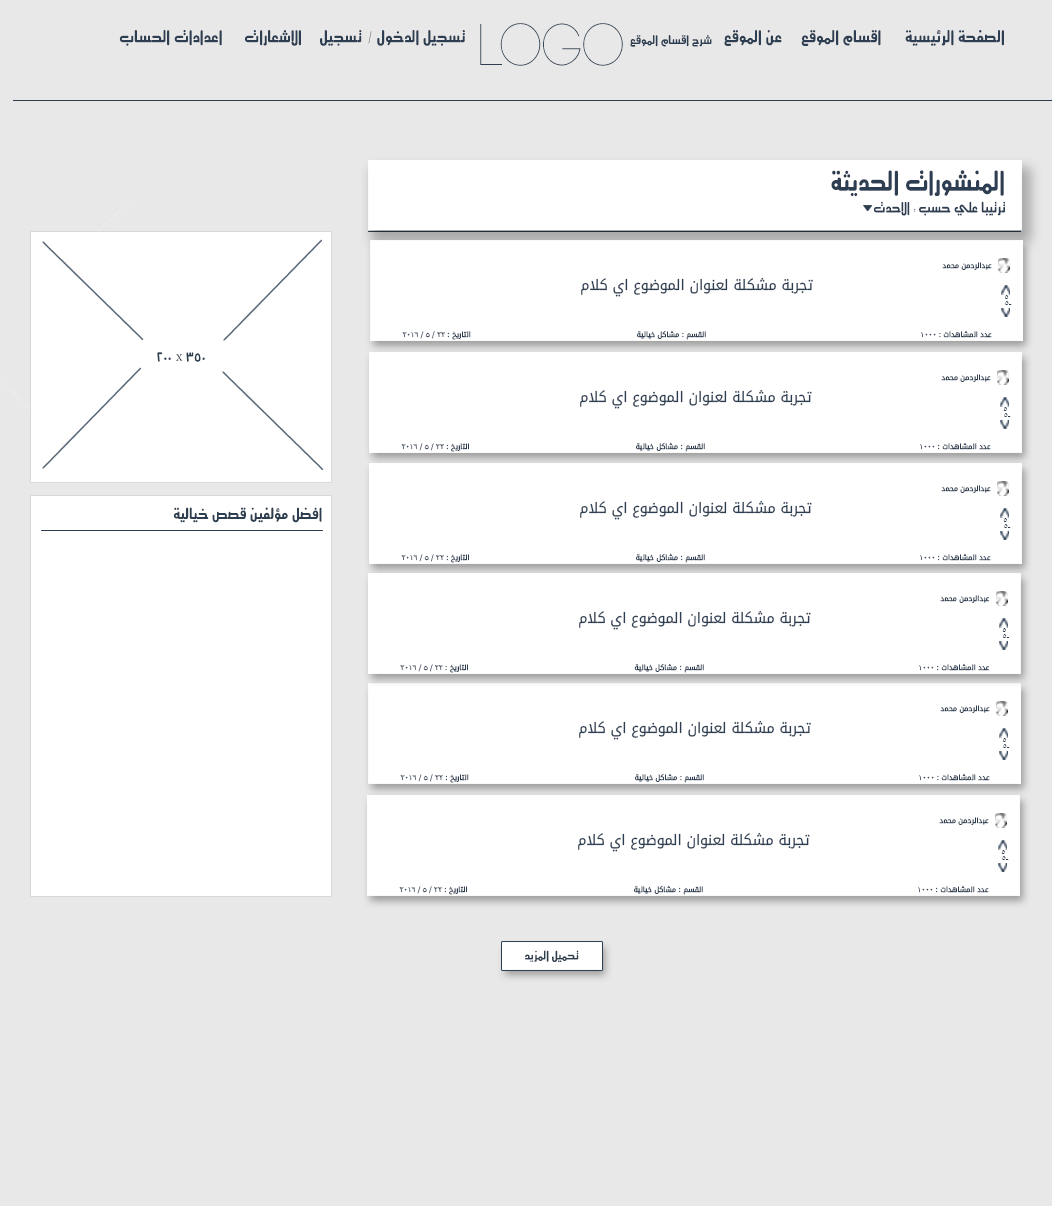
<style>
.page{position:relative;width:1052px;height:1206px;background:#ffffff}
.page>*{position:absolute;margin:0}
.t1{font:15.8px "Motken-Unicode-Anbobi";color:#2d3e52;scale:0.94 1}
.t2{font:58.8px "Code-Light";color:#2d3e52;scale:0.94 1}
.t3{font:11.6px "Motken-Unicode-Anbobi";color:#2d3e52;scale:0.94 1}
.t4{font:26.2px "Motken-Unicode-Anbobi";color:#2d3e52;scale:0.88 1}
.t5{font:13.7px "Motken-Unicode-Anbobi";color:#2d3e52;scale:0.88 1}
.t6{font:7.2px "DroidArabicKufi";color:#2d3e52}
.t7{font:14.4px "DroidArabicKufi";color:#2d3e52}
.t8{font:7.7px "TimesNewRomanPSMT";color:#2d3e52}
.t9{font:7.2px "Tahoma";color:#2d3e52}
.t10{font:14.7px "Motken-Unicode-Anbobi";color:#2d3e50;scale:0.94 1}
.t11{font:11.6px "Motken-Unicode-Anbobi";color:#2d3e50;scale:0.94 1}
</style>
<div class="page">
<p class="t1" style="left:119px;top:30px;width:103px;height:16px">اعدادات الحساب</p>
<p class="t1" style="left:245px;top:30px;width:56px;height:16px">الاشعارات</p>
<p class="t1" style="left:320px;top:30px;width:145px;height:16px">تسجيل الدخول / تسجيل</p>
<p class="t2" style="left:480px;top:23px;width:143px;height:43px">Logo</p>
<p class="t1" style="left:724px;top:30px;width:58px;height:16px">عن الموقع</p>
<p class="t1" style="left:801px;top:30px;width:80px;height:16px">اقسام الموقع</p>
<p class="t1" style="left:905px;top:30px;width:99px;height:16px">الصفحة الرئيسية</p>
<p class="t3" style="left:630px;top:35px;width:82px;height:12px">شرح اقسام الموقع</p>
<p class="t4" style="left:831px;top:170px;width:173px;height:27px">المنشورات الحديثة</p>
<p class="t5" style="left:874px;top:201px;width:131px;height:15px">ترتيبا علي حسب : الاحدث</p>
<p class="t6" style="left:942px;top:262px;width:50px;height:8px">عبدالرحمن محمد</p>
<p class="t7" style="left:581px;top:277px;width:232px;height:20px">تجربة مشكلة لعنوان الموضوع اي كلام</p>
<p class="t8" style="left:1005px;top:295px;width:4px;height:4px">5</p>
<p class="t8" style="left:1005px;top:301px;width:7px;height:4px">-5</p>
<p class="t9" style="left:402px;top:331px;width:69px;height:9px"><span class="t6">التاريخ </span>: 22 / 5 / 2016</p>
<p class="t6" style="left:637px;top:330px;width:69px;height:10px">القسم <span class="t9">:</span> مشاكل خيالية</p>
<p class="t6" style="left:921px;top:330px;width:71px;height:8px">عدد المشاهدات <span class="t9">: 1000</span></p>
<p class="t10" style="left:157px;top:352px;width:48px;height:10px">350 x 200</p>
<p class="t6" style="left:941px;top:374px;width:50px;height:8px">عبدالرحمن محمد</p>
<p class="t7" style="left:580px;top:389px;width:232px;height:20px">تجربة مشكلة لعنوان الموضوع اي كلام</p>
<p class="t8" style="left:1003px;top:407px;width:4px;height:4px">5</p>
<p class="t8" style="left:1004px;top:413px;width:7px;height:4px">-5</p>
<p class="t9" style="left:401px;top:443px;width:68px;height:9px"><span class="t6">التاريخ </span>: 22 / 5 / 2016</p>
<p class="t6" style="left:636px;top:442px;width:69px;height:10px">القسم <span class="t9">:</span> مشاكل خيالية</p>
<p class="t6" style="left:920px;top:442px;width:71px;height:8px">عدد المشاهدات <span class="t9">: 1000</span></p>
<p class="t6" style="left:941px;top:485px;width:50px;height:8px">عبدالرحمن محمد</p>
<p class="t10" style="left:173px;top:507px;width:149px;height:16px">افضل مؤلفين قصص خيالية</p>
<p class="t7" style="left:580px;top:500px;width:232px;height:20px">تجربة مشكلة لعنوان الموضوع اي كلام</p>
<p class="t8" style="left:1003px;top:518px;width:4px;height:4px">5</p>
<p class="t8" style="left:1004px;top:524px;width:7px;height:4px">-5</p>
<p class="t9" style="left:401px;top:554px;width:68px;height:9px"><span class="t6">التاريخ </span>: 22 / 5 / 2016</p>
<p class="t6" style="left:636px;top:553px;width:69px;height:10px">القسم <span class="t9">:</span> مشاكل خيالية</p>
<p class="t6" style="left:920px;top:553px;width:71px;height:8px">عدد المشاهدات <span class="t9">: 1000</span></p>
<p class="t6" style="left:940px;top:595px;width:50px;height:8px">عبدالرحمن محمد</p>
<p class="t7" style="left:579px;top:610px;width:232px;height:20px">تجربة مشكلة لعنوان الموضوع اي كلام</p>
<p class="t8" style="left:1002px;top:628px;width:4px;height:4px">5</p>
<p class="t8" style="left:1003px;top:634px;width:6px;height:4px">-5</p>
<p class="t9" style="left:400px;top:664px;width:68px;height:9px"><span class="t6">التاريخ </span>: 22 / 5 / 2016</p>
<p class="t6" style="left:634px;top:663px;width:70px;height:10px">القسم <span class="t9">:</span> مشاكل خيالية</p>
<p class="t6" style="left:919px;top:663px;width:71px;height:8px">عدد المشاهدات <span class="t9">: 1000</span></p>
<p class="t6" style="left:940px;top:705px;width:50px;height:8px">عبدالرحمن محمد</p>
<p class="t7" style="left:579px;top:720px;width:232px;height:20px">تجربة مشكلة لعنوان الموضوع اي كلام</p>
<p class="t8" style="left:1003px;top:738px;width:4px;height:4px">5</p>
<p class="t8" style="left:1003px;top:744px;width:7px;height:4px">-5</p>
<p class="t9" style="left:400px;top:774px;width:69px;height:9px"><span class="t6">التاريخ </span>: 22 / 5 / 2016</p>
<p class="t6" style="left:635px;top:773px;width:69px;height:10px">القسم <span class="t9">:</span> مشاكل خيالية</p>
<p class="t6" style="left:919px;top:773px;width:71px;height:8px">عدد المشاهدات <span class="t9">: 1000</span></p>
<p class="t6" style="left:939px;top:817px;width:50px;height:8px">عبدالرحمن محمد</p>
<p class="t7" style="left:578px;top:832px;width:232px;height:20px">تجربة مشكلة لعنوان الموضوع اي كلام</p>
<p class="t8" style="left:1001px;top:850px;width:4px;height:4px">5</p>
<p class="t8" style="left:1002px;top:856px;width:7px;height:4px">-5</p>
<p class="t9" style="left:399px;top:886px;width:68px;height:9px"><span class="t6">التاريخ </span>: 22 / 5 / 2016</p>
<p class="t6" style="left:634px;top:885px;width:69px;height:10px">القسم <span class="t9">:</span> مشاكل خيالية</p>
<p class="t6" style="left:918px;top:885px;width:71px;height:8px">عدد المشاهدات <span class="t9">: 1000</span></p>
<p class="t11" style="left:525px;top:950px;width:54px;height:12px">تحميل المزيد</p>
</div>
